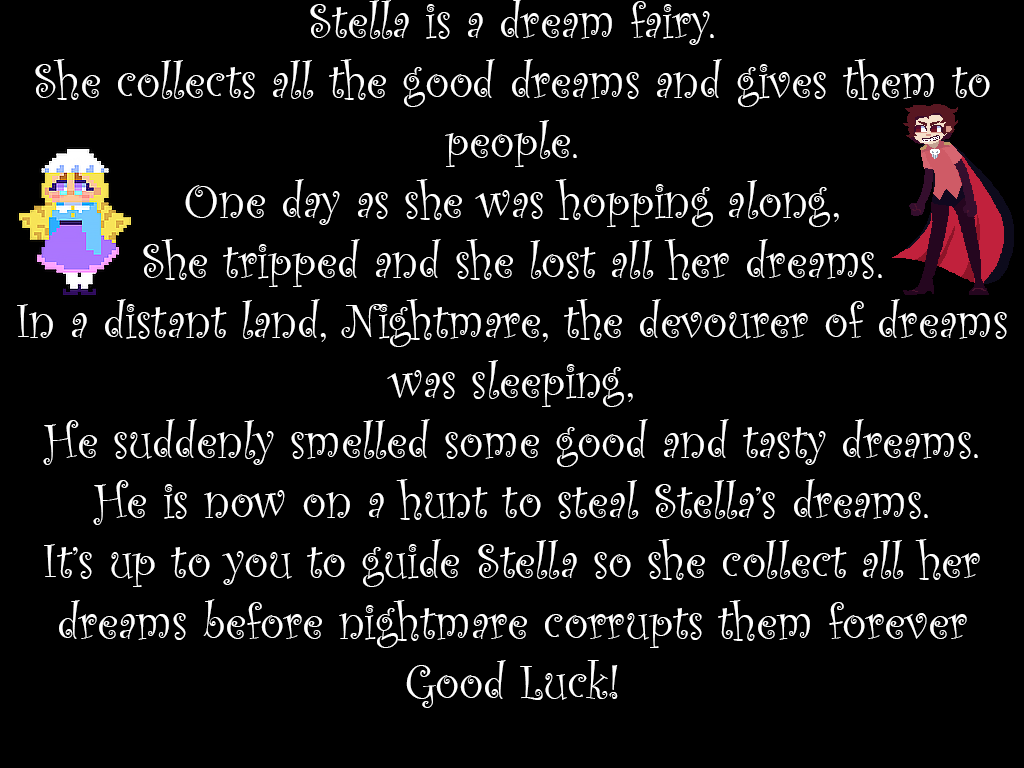
<style>
.page{position:relative;width:1024px;height:768px;background:#000000}
.page>*{position:absolute;margin:0}
.t1{font:50px "CurlzMT";color:#ffffff}
</style>
<div class="page">
<p class="t1" style="left:17px;top:0px;width:990px;height:708px;text-align:center">Stella is a dream fairy.<br>She collects all the good dreams and gives them to people.<br>One day as she was hopping along,<br>She tripped and she lost all her dreams.<br>In a distant land, Nightmare, the devourer of dreams was sleeping,<br>He suddenly smelled some good and tasty dreams.<br>He is now on a hunt to steal Stella’s dreams.<br>It’s up to you to guide Stella so she collect all her dreams before nightmare corrupts them forever<br>Good Luck!</p>
</div>
